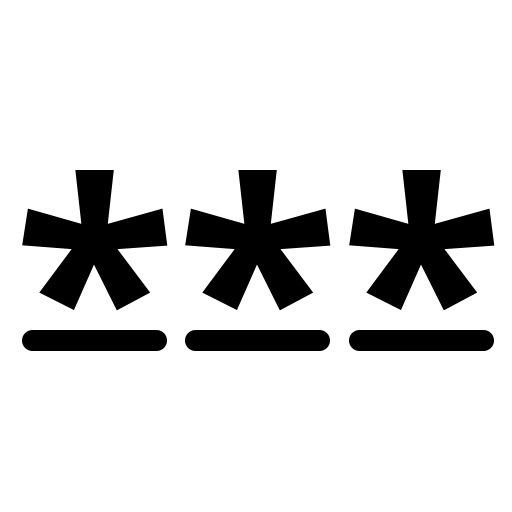
<style>
.page{position:relative;width:512px;height:512px;background:#ffffff}
.page>*{position:absolute;margin:0}
.t1{font:300px "OpenSans-Bold";color:#000000}
</style>
<div class="page">
<p class="t1" style="left:22px;top:170px;width:473px;height:141px">***</p>
</div>
